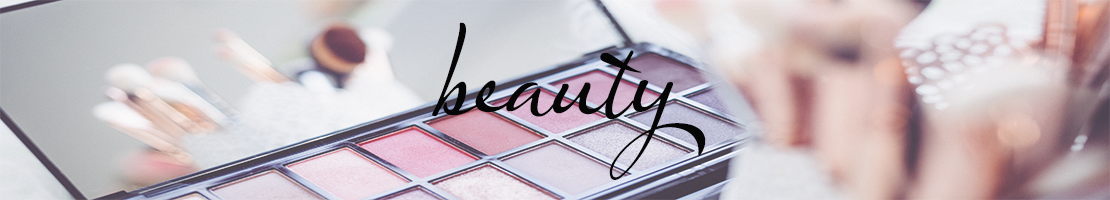
<style>
.page{position:relative;width:1110px;height:200px}
.page>*{position:absolute;margin:0}
.t1{font:120px "Olicana-Smooth";color:#060606}
</style>
<div class="page">
<p class="t1" style="left:432px;top:22px;width:274px;height:158px">beauty</p>
</div>
